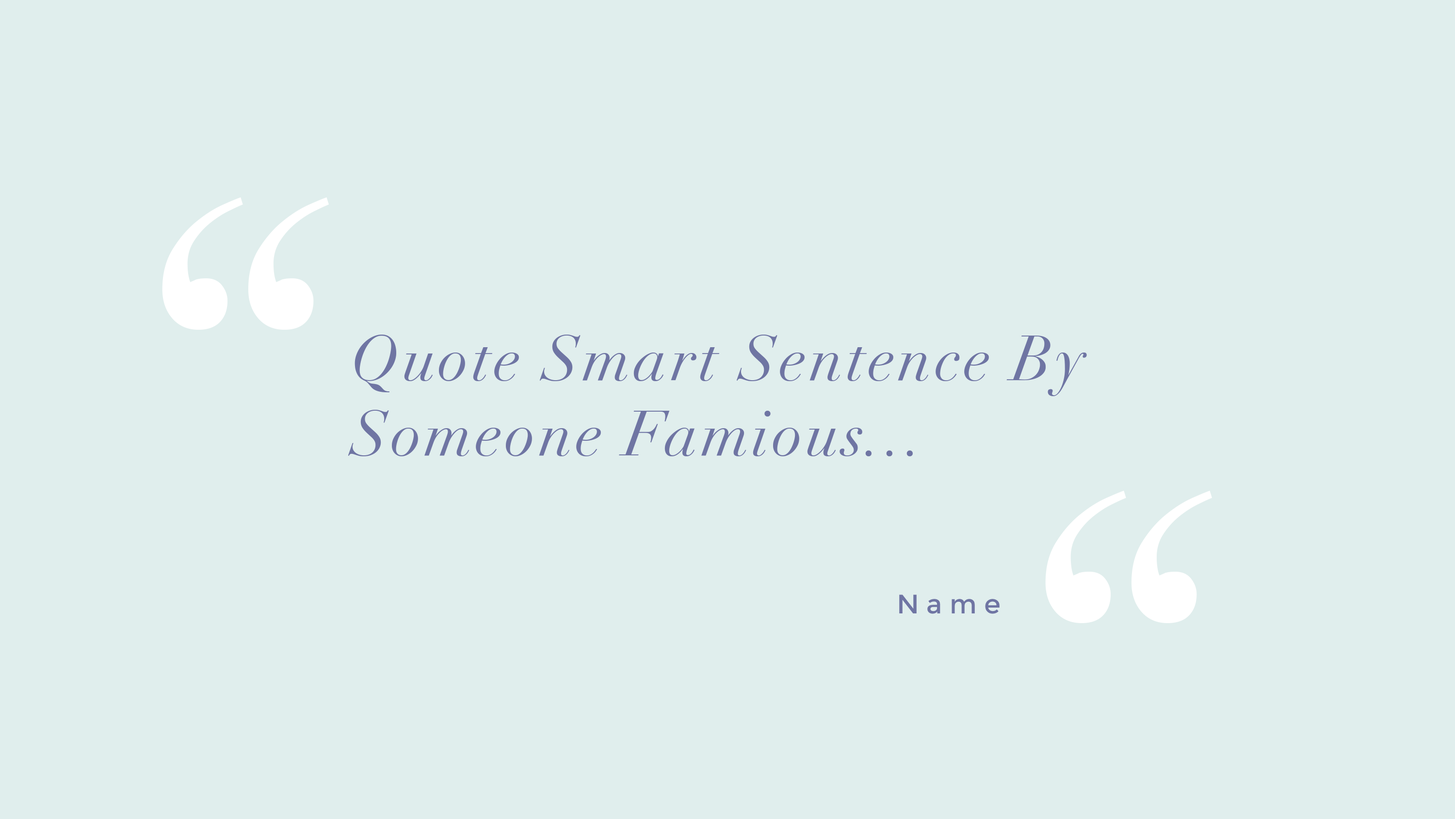
<style>
.page{position:relative;width:1455px;height:819px;background:#e0eeed}
.page>*{position:absolute;margin:0}
.t1{font:547.8px "Didot-Italic";color:#ffffff}
.t2{font:62.7px "Didot-Italic";letter-spacing:0.052em;color:#6f75a3}
.t3{font:26.7px "Montserrat-Regular";letter-spacing:0.28em;color:#6f75a3}
</style>
<div class="page">
<p class="t1" style="left:162px;top:197px;width:167px;height:133px">“</p>
<p class="t2" style="left:348px;top:335px;width:739px;height:121px">Quote Smart Sentence By <br>Someone Famious...</p>
<p class="t1" style="left:1045px;top:491px;width:167px;height:132px">“</p>
<p class="t3" style="left:899px;top:595px;width:101px;height:19px">Name</p>
</div>
